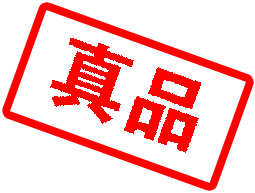
<style>
.page{position:relative;width:255px;height:193px;background:#ffffff}
.page>*{position:absolute;margin:0}
.t1{font:81.9px "FZDHTJW--GB1-0";color:#ff0000;text-transform:uppercase}
</style>
<div class="page">
<p class="t1" style="left:50px;top:37px;width:152px;height:116px;rotate:20deg">真品</p>
</div>
